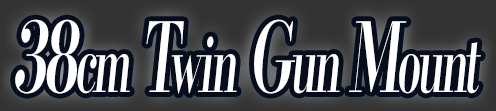
<style>
.page{position:relative;width:496px;height:111px;background:#070d1d}
.page>*{position:absolute;margin:0}
.t1{font:76.8px "KochoStd-Heavy";letter-spacing:-0.08em;color:#ffffff;font-style:italic;scale:0.57 1}
.t2{font:96px "KochoStd-Heavy";letter-spacing:-0.08em;color:#ffffff;font-style:italic;scale:0.57 1}
</style>
<div class="page">
<p class="t1" style="left:15px;top:19px;width:466px;height:75px"><span class="t2">38</span>cm<span class="t2"> T</span>win<span class="t2"> G</span>un <span class="t2">M</span>ount</p>
</div>
